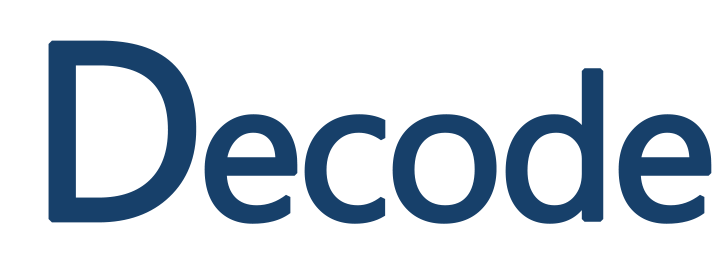
<style>
.page{position:relative;width:724px;height:277px;background:#ffffff}
.page>*{position:absolute;margin:0}
.t1{font:200px "SegoeUI";letter-spacing:-0.05em;color:#17406a;font-weight:bold}
.t2{font:250px "SegoeUI";letter-spacing:-0.05em;color:#17406a;font-weight:bold}
</style>
<div class="page">
<p class="t1" style="left:48px;top:40px;width:664px;height:184px"><span class="t2">D</span>ecode</p>
</div>
